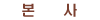
<style>
.page{position:relative;width:100px;height:20px;background:#ffffff}
.page>*{position:absolute;margin:0}
.t1{font:14px "H2hdrM";color:#7b4030}
</style>
<div class="page">
<p class="t1" style="left:22px;top:3px;width:55px;height:14px">본      사</p>
</div>
